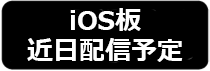
<style>
.page{position:relative;width:210px;height:71px;background:#000000}
.page>*{position:absolute;margin:0}
.t1{font:26px/30px "Meiryo-Bold";color:#ffffff}
</style>
<div class="page">
<p class="t1" style="left:27px;top:8px;width:156px;height:54px;text-align:center">iOS板<br>近日配信予定</p>
</div>
